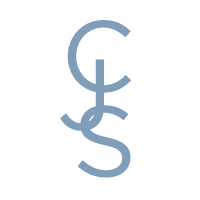
<style>
.page{position:relative;width:200px;height:200px;background:#ffffff}
.page>*{position:absolute;margin:0}
.t1{font:100px "Gotham-Book";color:#809eba}
</style>
<div class="page">
<p class="t1" style="left:67px;top:20px;width:65px;height:73px">C</p>
<p class="t1" style="left:60px;top:59px;width:44px;height:72px">J</p>
<p class="t1" style="left:77px;top:105px;width:54px;height:73px">S</p>
</div>
